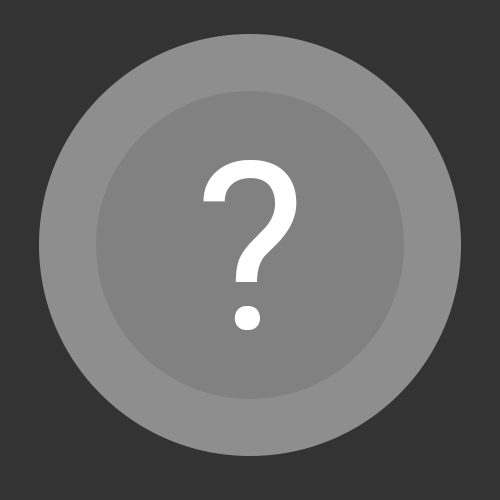
<style>
.page{position:relative;width:500px;height:500px;background:#333333}
.page>*{position:absolute;margin:0}
.t1{font:234px "Roboto-Regular";color:#ffffff}
</style>
<div class="page">
<p class="t1" style="left:203px;top:159px;width:94px;height:171px">?</p>
</div>
